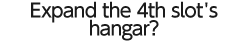
<style>
.page{position:relative;width:249px;height:42px;background:#ffffff}
.page>*{position:absolute;margin:0}
.t1{font:19px/18px "UDShinGoPro-Medium";letter-spacing:-0.04em;color:#1b1b1b}
</style>
<div class="page">
<p class="t1" style="left:31px;top:1px;width:187px;height:40px;text-align:center">Expand the 4th slot's<br>hangar?</p>
</div>
